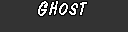
<style>
.page{position:relative;width:128px;height:32px;background:#333333}
.page>*{position:absolute;margin:0}
.t1{font:18px "DomDiagonalBT-Regular";letter-spacing:0.075em;color:#ffffff}
.t2{font:20px "DomDiagonalBT-Regular";letter-spacing:0.075em;color:#ffffff}
</style>
<div class="page">
<p class="t1" style="left:38px;top:1px;width:49px;height:15px"><span class="t2">G</span>HOST</p>
</div>
